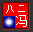
<style>
.page{position:relative;width:33px;height:32px;background:#f20000}
.page>*{position:absolute;margin:0}
.t1{font:10.4px "SimSun";color:#ffffff}
.t2{font:11.7px "SimSun";color:#ffffff}
</style>
<div class="page">
<p class="t1" style="left:6px;top:5px;width:19px;height:8px">八二</p>
<p class="t2" style="left:16px;top:15px;width:11px;height:12px">冯</p>
</div>
